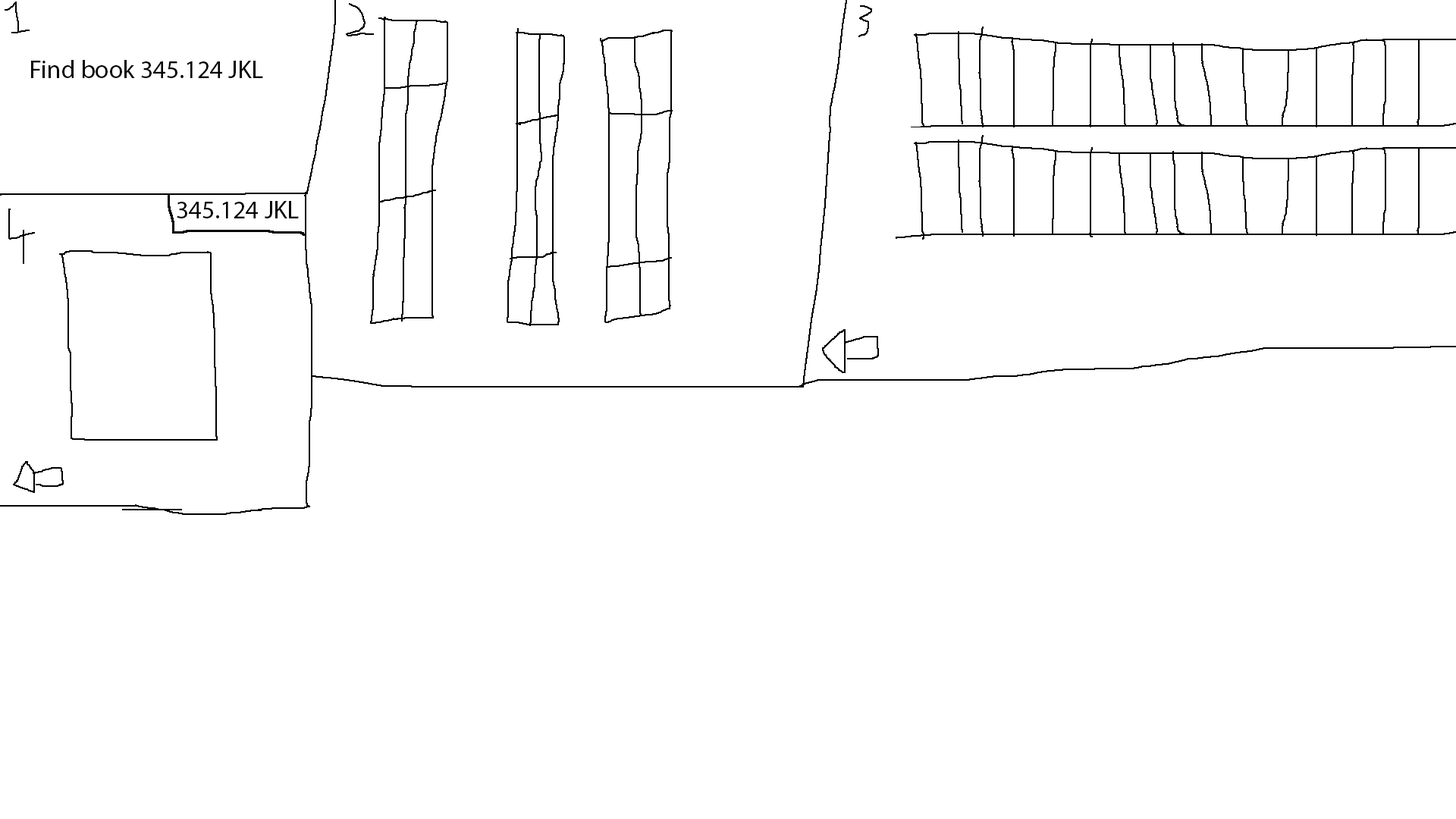
<style>
.page{position:relative;width:1456px;height:819px;background:#ffffff}
.page>*{position:absolute;margin:0}
.t1{font:9.1px "MyriadPro-Regular";color:#030303}
</style>
<div class="page">
<p class="t1" style="left:31px;top:60px;width:232px;height:18px">Find book 345.124 JKL</p>
<p class="t1" style="left:177px;top:201px;width:122px;height:17px">345.124 JKL</p>
</div>
